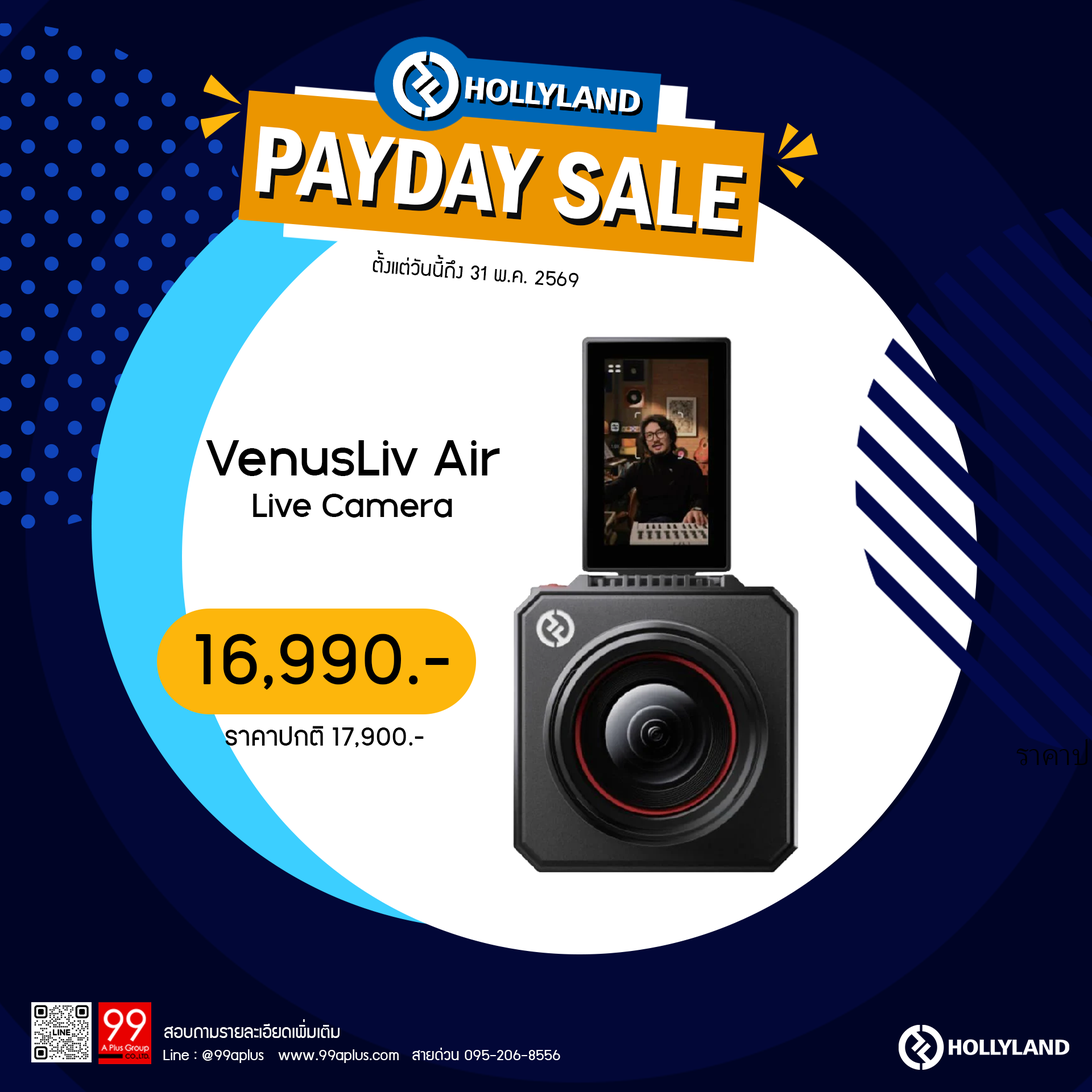
<style>
.page{position:relative;width:1092px;height:1092px;background:#ffffff}
.page>*{position:absolute;margin:0}
.t1{font:97.5px "FranklinGothic-DemiCond";color:#ffffff}
.t2{font:97.5px "FranklinGothic-DemiCond"}
.t3{font:23.2px "supermarket";color:#000000}
.t4{font:54px "GalakPro-Demo";color:#000000}
.t5{font:35.6px "GalakPro-Demo";color:#000000}
.t6{font:83.5px "PK-NakhonPathom-Demo";color:#000000}
.t7{font:30.3px "PK-NakhonPathom-Demo";color:#000000}
.t8{font:19.8px "supermarket";color:#ffffff}
.t9{font:17.2px "supermarket";color:#ffffff}
</style>
<div class="page">
<p class="t1" style="left:255px;top:126px;width:488px;height:105px;rotate:5deg">PAYDAY SALE</p>
<p class="t2" style="left:259px;top:133px;width:488px;height:105px;rotate:5deg">PAYDAY SALE</p>
<p class="t3" style="left:373px;top:250px;width:205px;height:37px;rotate:4deg">ตั้งแต่วันนี้ถึง 31 พ.ค. 2569</p>
<p class="t4" style="left:206px;top:440px;width:294px;height:36px">VenusLiv Air</p>
<p class="t5" style="left:253px;top:494px;width:199px;height:24px">Live Camera</p>
<p class="t6" style="left:196px;top:634px;width:253px;height:56px">16,990.-</p>
<p class="t7" style="left:225px;top:726px;width:199px;height:21px">ราคาปกติ 17,900.-</p>
<p class="t8" style="left:164px;top:1019px;width:176px;height:19px">สอบถามรายละเอียดเพิ่มเติม</p>
<p class="t9" style="left:163px;top:1049px;width:236px;height:14px">Line : @99aplus   www.99aplus.com</p>
<p class="t9" style="left:412px;top:1048px;width:148px;height:12px">สายด่วน 095-206-8556</p>
</div>
